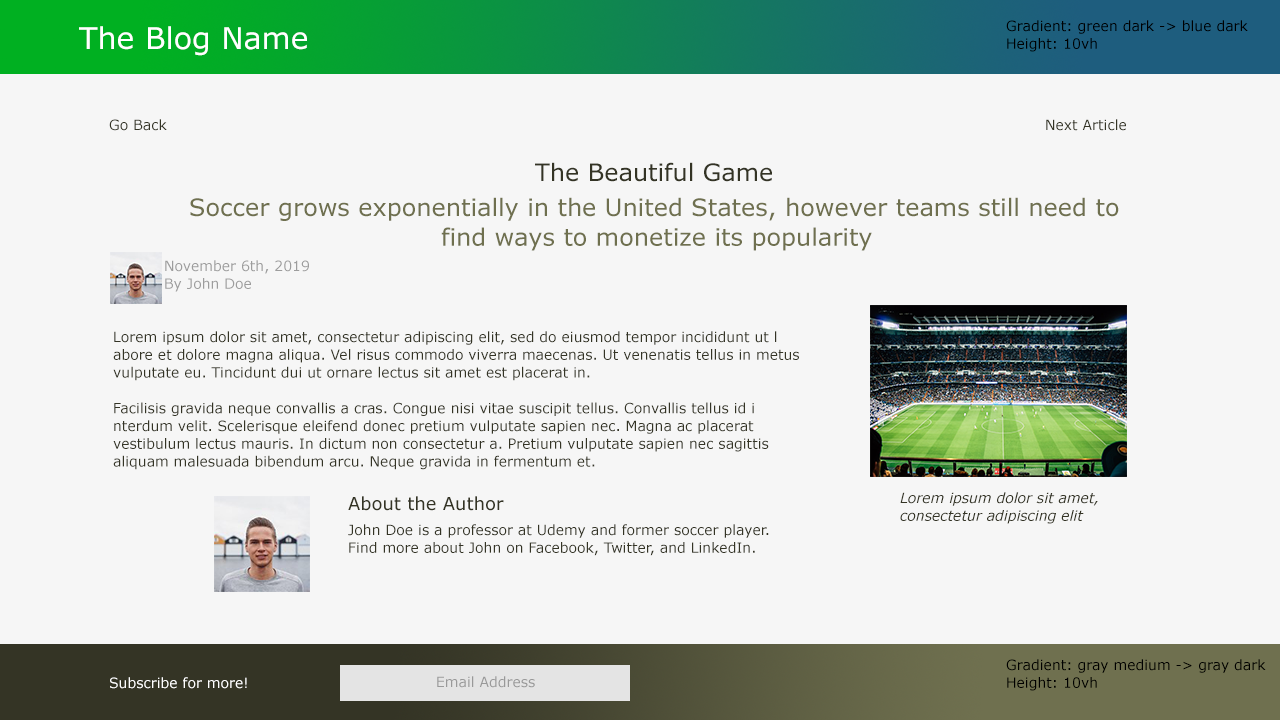
<style>
.page{position:relative;width:1280px;height:720px;background:#f6f6f6}
.page>*{position:absolute;margin:0}
.t1{font:30px "Verdana";color:#ffffff}
.t2{font:14px "Verdana";color:#000000}
.t3{font:14px "Verdana";color:#343425}
.t4{font:24px "Verdana";color:#343425}
.t5{font:24px "Verdana";color:#6f704f}
.t6{font:14px "Verdana";color:#9d9d9d}
.t7{font:18px "Verdana";color:#343425}
.t8{font:14px "Verdana-Italic";color:#343425}
.t9{font:14px "Verdana";color:#ffffff}
.t10{font:14px "Verdana";color:#999999}
</style>
<div class="page">
<p class="t1" style="left:79px;top:26px;width:228px;height:30px">The Blog Name</p>
<p class="t2" style="left:1006px;top:20px;width:242px;height:32px;text-align:right">Gradient: green dark -&gt; blue dark<br>Height: 10vh</p>
<p class="t3" style="left:109px;top:119px;width:58px;height:12px">Go Back</p>
<p class="t3" style="left:1046px;top:119px;width:80px;height:12px">Next Article</p>
<p class="t4" style="left:535px;top:162px;width:237px;height:20px">The Beautiful Game</p>
<p class="t5" style="left:190px;top:197px;width:929px;height:54px;text-align:right">Soccer grows exponentially in the United States, however teams still need to <br>       find ways to monetize its popularity</p>
<p class="t6" style="left:165px;top:260px;width:144px;height:32px;text-align:right">November 6th, 2019<br>By John Doe</p>
<p class="t3" style="left:113px;top:331px;width:686px;height:139px;text-align:right">Lorem ipsum dolor sit amet, consectetur adipiscing elit, sed do eiusmod tempor incididunt ut l<br>abore et dolore magna aliqua. Vel risus commodo viverra maecenas. Ut venenatis tellus in metus <br>vulputate eu. Tincidunt dui ut ornare lectus sit amet est placerat in. <br><br>Facilisis gravida neque convallis a cras. Congue nisi vitae suscipit tellus. Convallis tellus id i<br>nterdum velit. Scelerisque eleifend donec pretium vulputate sapien nec. Magna ac placerat <br>vestibulum lectus mauris. In dictum non consectetur a. Pretium vulputate sapien nec sagittis <br>aliquam malesuada bibendum arcu. Neque gravida in fermentum et.</p>
<p class="t7" style="left:348px;top:496px;width:156px;height:15px">About the Author</p>
<p class="t8" style="left:900px;top:492px;width:198px;height:32px;text-align:right">Lorem ipsum dolor sit amet, <br>consectetur adipiscing elit</p>
<p class="t3" style="left:348px;top:524px;width:421px;height:32px;text-align:right">John Doe is a professor at Udemy and former soccer player.<br>Find more about John on Facebook, Twitter, and LinkedIn.</p>
<p class="t2" style="left:1006px;top:659px;width:260px;height:32px;text-align:right">Gradient: gray medium -&gt; gray dark<br>Height: 10vh</p>
<p class="t9" style="left:110px;top:677px;width:137px;height:12px">Subscribe for more!</p>
<p class="t10" style="left:437px;top:676px;width:98px;height:12px">Email Address</p>
</div>
